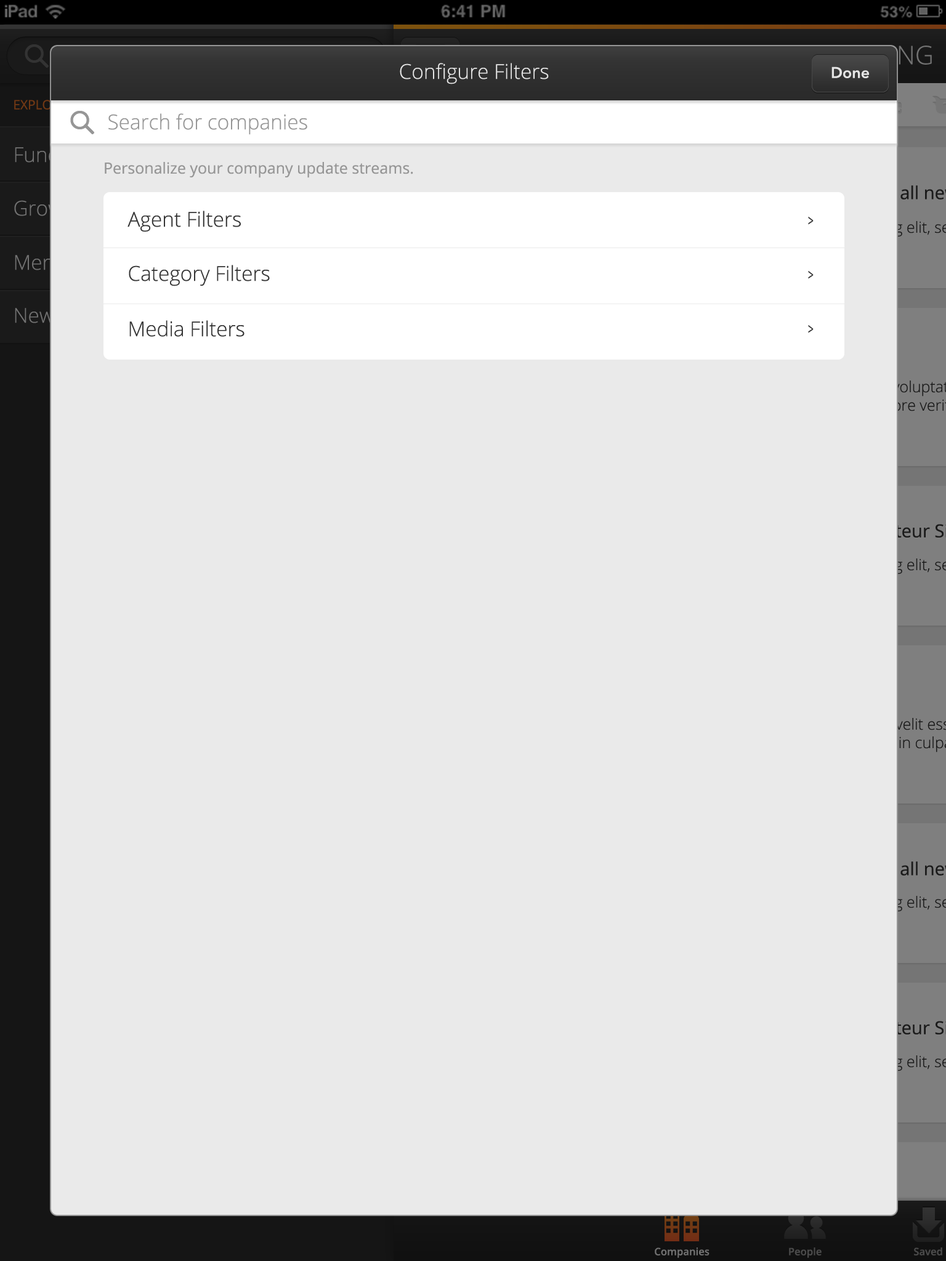
<style>
.page{position:relative;width:946px;height:1261px;background:#eaeaea}
.page>*{position:absolute;margin:0}
.t1{font:20.5px "OpenSans-Light";color:#e5e5e5}
.t2{font:15.4px "AvenirNext-DemiBold";color:#e5e5e5}
.t3{font:20.5px "OpenSans-Light";color:#969696}
.t4{font:15.4px "OpenSans";color:#969696}
.t5{font:20.5px "OpenSans-Light";color:#343434}
.t6{font:15.4px "OpenSans";color:#343434;scale:0.64 1}
</style>
<div class="page">
<p class="t1" style="left:400px;top:63px;width:149px;height:21px">Configure Filters</p>
<p class="t2" style="left:831px;top:66px;width:38px;height:12px">Done</p>
<p class="t3" style="left:108px;top:113px;width:199px;height:22px">Search for companies</p>
<p class="t4" style="left:105px;top:162px;width:308px;height:16px">Personalize your company update streams.</p>
<p class="t5" style="left:127px;top:211px;width:114px;height:21px">Agent Filters</p>
<p class="t6" style="left:808px;top:217px;width:5px;height:8px">&gt;</p>
<p class="t5" style="left:129px;top:265px;width:141px;height:21px">Category Filters</p>
<p class="t6" style="left:808px;top:271px;width:5px;height:8px">&gt;</p>
<p class="t5" style="left:129px;top:320px;width:115px;height:17px">Media Filters</p>
<p class="t6" style="left:808px;top:325px;width:5px;height:8px">&gt;</p>
</div>
